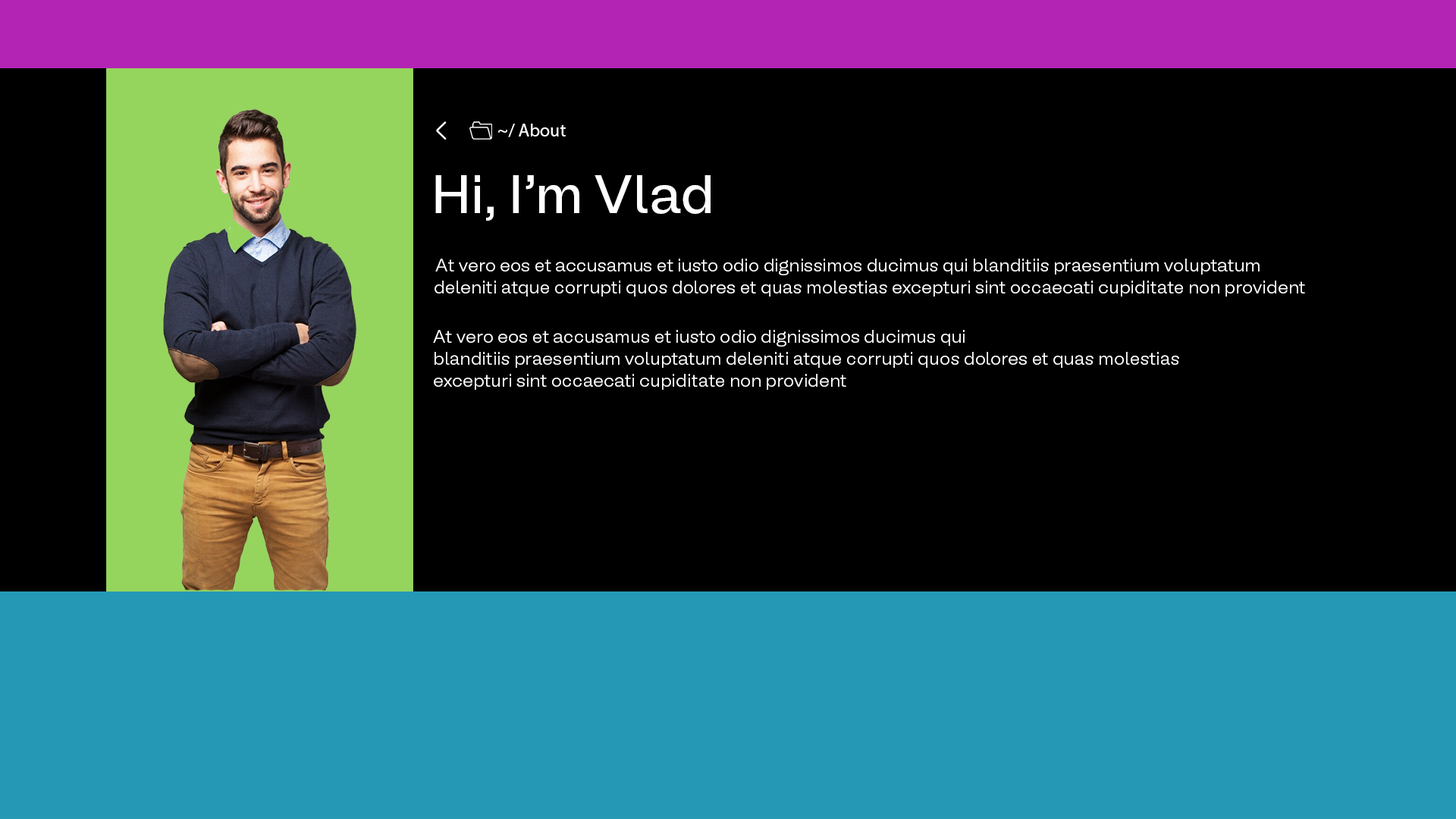
<style>
.page{position:relative;width:1456px;height:819px;background:#000000}
.page>*{position:absolute;margin:0}
.t1{font:18.2px "MyriadPro-Regular";color:#ffffff}
.t2{font:54.6px "BLMelody-Regular";color:#ffffff}
.t3{font:18.2px "BLMelody-Light";color:#ffffff}
</style>
<div class="page">
<p class="t1" style="left:498px;top:124px;width:68px;height:13px">~/ About</p>
<p class="t2" style="left:435px;top:175px;width:276px;height:46px">Hi, I’m Vlad</p>
<p class="t3" style="left:435px;top:259px;width:870px;height:38px;text-align:center">At vero eos et accusamus et iusto odio dignissimos ducimus qui blanditiis praesentium voluptatum <br>    deleniti atque corrupti quos dolores et quas molestias excepturi sint occaecati cupiditate non provident</p>
<p class="t3" style="left:433px;top:330px;width:746px;height:60px">At vero eos et accusamus et iusto odio dignissimos ducimus qui <br>blanditiis praesentium voluptatum deleniti atque corrupti quos dolores et quas molestias <br>excepturi sint occaecati cupiditate non provident</p>
</div>
